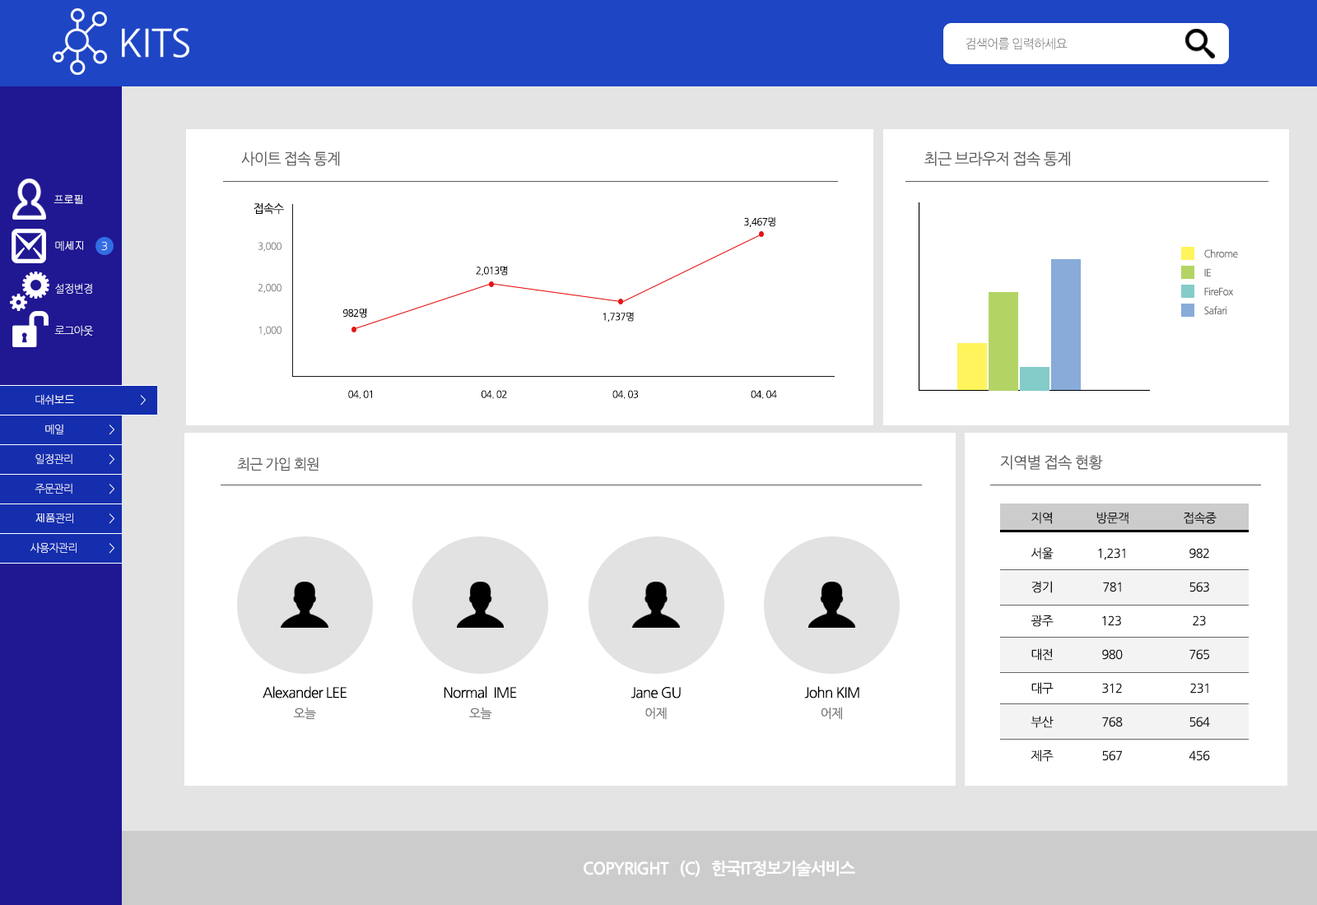
<style>
.page{position:relative;width:1317px;height:905px;background:#ffffff}
.page>*{position:absolute;margin:0}
.t1{font:12.3px "NanumGothicLight";letter-spacing:-0.05em;color:#737373}
.t2{font:15.4px "NanumGothic";letter-spacing:-0.05em;color:#616161;scale:0.96 1}
.t3{font:15.4px "NanumGothic";letter-spacing:-0.05em;color:#616161}
.t4{font:10.7px "Gulim";letter-spacing:-0.05em;color:#ffffff}
.t5{font:10.7px "NanumGothicLight";letter-spacing:-0.05em;color:#ffffff}
.t6{font:11.7px "NanumGothic";letter-spacing:-0.05em;color:#000000;scale:0.96 1}
.t7{font:9.9px "NanumGothic";letter-spacing:-0.05em;color:#000000;scale:0.96 1}
.t8{font:10.7px "NanumGothicLight";letter-spacing:-0.05em}
.t9{font:9.9px "NanumGothic";letter-spacing:-0.05em;color:#8d8d8d;scale:0.96 1}
.t10{font:9.9px "NanumGothic";letter-spacing:-0.05em;color:#737373}
.t11{font:14.3px "NanumGothic";letter-spacing:-0.05em;color:#616161}
.t12{font:12.3px "NanumGothic";letter-spacing:-0.05em;color:#181818}
.t13{font:14.3px "NanumGothic";letter-spacing:-0.05em;color:#000000}
.t14{font:12.6px "NanumGothic";letter-spacing:-0.05em;color:#737373}
.t15{font:16.5px "NanumGothicBold";letter-spacing:-0.05em;color:#ffffff}
</style>
<div class="page">
<p class="t1" style="left:966px;top:38px;width:102px;height:12px">검색어를 입력하세요</p>
<p class="t2" style="left:241px;top:151px;width:99px;height:15px">사이트 접속 통계</p>
<p class="t3" style="left:924px;top:151px;width:146px;height:15px">최근 브라우저 접속 통계</p>
<p class="t4" style="left:54px;top:195px;width:29px;height:9px"><span class="t5">프</span>로필</p>
<p class="t6" style="left:254px;top:202px;width:30px;height:13px">접속수</p>
<p class="t7" style="left:744px;top:217px;width:31px;height:10px">3,467명</p>
<p class="t4" style="left:55px;top:240px;width:28px;height:11px"><span class="t5">메</span>세지</p>
<p class="t8" style="left:101px;top:242px;width:6px;height:9px">3</p>
<p class="t9" style="left:258px;top:242px;width:24px;height:10px">3,000</p>
<p class="t10" style="left:1204px;top:249px;width:34px;height:9px">Chrome</p>
<p class="t7" style="left:476px;top:266px;width:32px;height:11px">2,013명</p>
<p class="t10" style="left:1204px;top:268px;width:7px;height:9px">IE</p>
<p class="t5" style="left:55px;top:283px;width:37px;height:11px">설정변경</p>
<p class="t9" style="left:258px;top:284px;width:24px;height:9px">2,000</p>
<p class="t10" style="left:1204px;top:287px;width:29px;height:9px">FireFox</p>
<p class="t7" style="left:342px;top:308px;width:25px;height:11px">982명</p>
<p class="t7" style="left:603px;top:312px;width:31px;height:11px">1,737명</p>
<p class="t10" style="left:1204px;top:306px;width:23px;height:9px">Safari</p>
<p class="t5" style="left:54px;top:325px;width:40px;height:11px">로그아웃</p>
<p class="t9" style="left:258px;top:326px;width:24px;height:10px">1,000</p>
<p class="t5" style="left:35px;top:394px;width:39px;height:11px">대쉬<span class="t4">보드</span></p>
<p class="t8" style="left:141px;top:395px;width:5px;height:11px">&gt;</p>
<p class="t7" style="left:348px;top:390px;width:24px;height:9px">04. 01</p>
<p class="t7" style="left:482px;top:390px;width:25px;height:9px">04. 02</p>
<p class="t7" style="left:612px;top:390px;width:26px;height:9px">04. 03</p>
<p class="t7" style="left:751px;top:390px;width:26px;height:9px">04. 04</p>
<p class="t8" style="left:45px;top:424px;width:18px;height:11px">메일</p>
<p class="t8" style="left:109px;top:425px;width:5px;height:10px">&gt;</p>
<p class="t5" style="left:35px;top:454px;width:37px;height:10px">일정관리</p>
<p class="t8" style="left:109px;top:454px;width:5px;height:11px">&gt;</p>
<p class="t11" style="left:237px;top:458px;width:82px;height:14px">최근 가입 회원</p>
<p class="t3" style="left:1000px;top:455px;width:103px;height:15px">지역별 접속 현황</p>
<p class="t5" style="left:35px;top:483px;width:37px;height:11px">주문관리</p>
<p class="t8" style="left:109px;top:484px;width:5px;height:11px">&gt;</p>
<p class="t4" style="left:35px;top:513px;width:38px;height:11px">제품<span class="t5">관리</span></p>
<p class="t8" style="left:109px;top:514px;width:5px;height:10px">&gt;</p>
<p class="t12" style="left:1031px;top:512px;width:21px;height:12px">지역</p>
<p class="t12" style="left:1096px;top:512px;width:32px;height:12px">방문객</p>
<p class="t12" style="left:1184px;top:512px;width:33px;height:12px">접속중</p>
<p class="t5" style="left:30px;top:542px;width:47px;height:11px">사용자관리</p>
<p class="t8" style="left:109px;top:543px;width:5px;height:11px">&gt;</p>
<p class="t12" style="left:1031px;top:547px;width:23px;height:13px">서울</p>
<p class="t12" style="left:1098px;top:548px;width:27px;height:13px">1,231</p>
<p class="t12" style="left:1189px;top:548px;width:20px;height:11px">982</p>
<p class="t12" style="left:1031px;top:581px;width:21px;height:12px">경기</p>
<p class="t12" style="left:1103px;top:582px;width:18px;height:11px">781</p>
<p class="t12" style="left:1189px;top:582px;width:20px;height:11px">563</p>
<p class="t12" style="left:1031px;top:615px;width:23px;height:12px">광주</p>
<p class="t12" style="left:1102px;top:616px;width:19px;height:10px">123</p>
<p class="t12" style="left:1193px;top:616px;width:13px;height:10px">23</p>
<p class="t12" style="left:1031px;top:649px;width:22px;height:12px">대전</p>
<p class="t12" style="left:1102px;top:649px;width:21px;height:11px">980</p>
<p class="t12" style="left:1189px;top:649px;width:21px;height:11px">765</p>
<p class="t13" style="left:263px;top:686px;width:84px;height:13px">Alexander LEE</p>
<p class="t13" style="left:444px;top:686px;width:73px;height:13px">Normal  IME</p>
<p class="t13" style="left:631px;top:687px;width:50px;height:12px">Jane GU</p>
<p class="t13" style="left:804px;top:686px;width:55px;height:13px">John KIM</p>
<p class="t12" style="left:1031px;top:682px;width:23px;height:13px">대구</p>
<p class="t12" style="left:1102px;top:683px;width:20px;height:11px">312</p>
<p class="t12" style="left:1190px;top:683px;width:18px;height:11px">231</p>
<p class="t14" style="left:293px;top:707px;width:23px;height:12px">오늘</p>
<p class="t14" style="left:469px;top:707px;width:23px;height:12px">오늘</p>
<p class="t14" style="left:645px;top:707px;width:22px;height:13px">어제</p>
<p class="t14" style="left:821px;top:707px;width:21px;height:13px">어제</p>
<p class="t12" style="left:1031px;top:716px;width:23px;height:12px">부산</p>
<p class="t12" style="left:1102px;top:717px;width:21px;height:11px">768</p>
<p class="t12" style="left:1189px;top:717px;width:21px;height:11px">564</p>
<p class="t12" style="left:1031px;top:750px;width:23px;height:12px">제주</p>
<p class="t12" style="left:1102px;top:751px;width:20px;height:10px">567</p>
<p class="t12" style="left:1189px;top:751px;width:21px;height:10px">456</p>
<p class="t15" style="left:584px;top:860px;width:271px;height:17px">COPYRIGHT   (C)   한국IT정보기술서비스</p>
</div>
